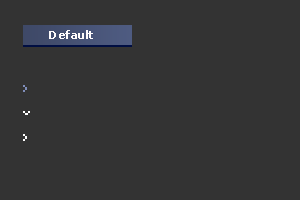
<style>
.page{position:relative;width:300px;height:200px;background:#333333}
.page>*{position:absolute;margin:0}
.t1{font:11px "Verdana-Bold";color:#fffcfc}
</style>
<div class="page">
<p class="t1" style="left:49px;top:30px;width:44px;height:9px">Default</p>
</div>
